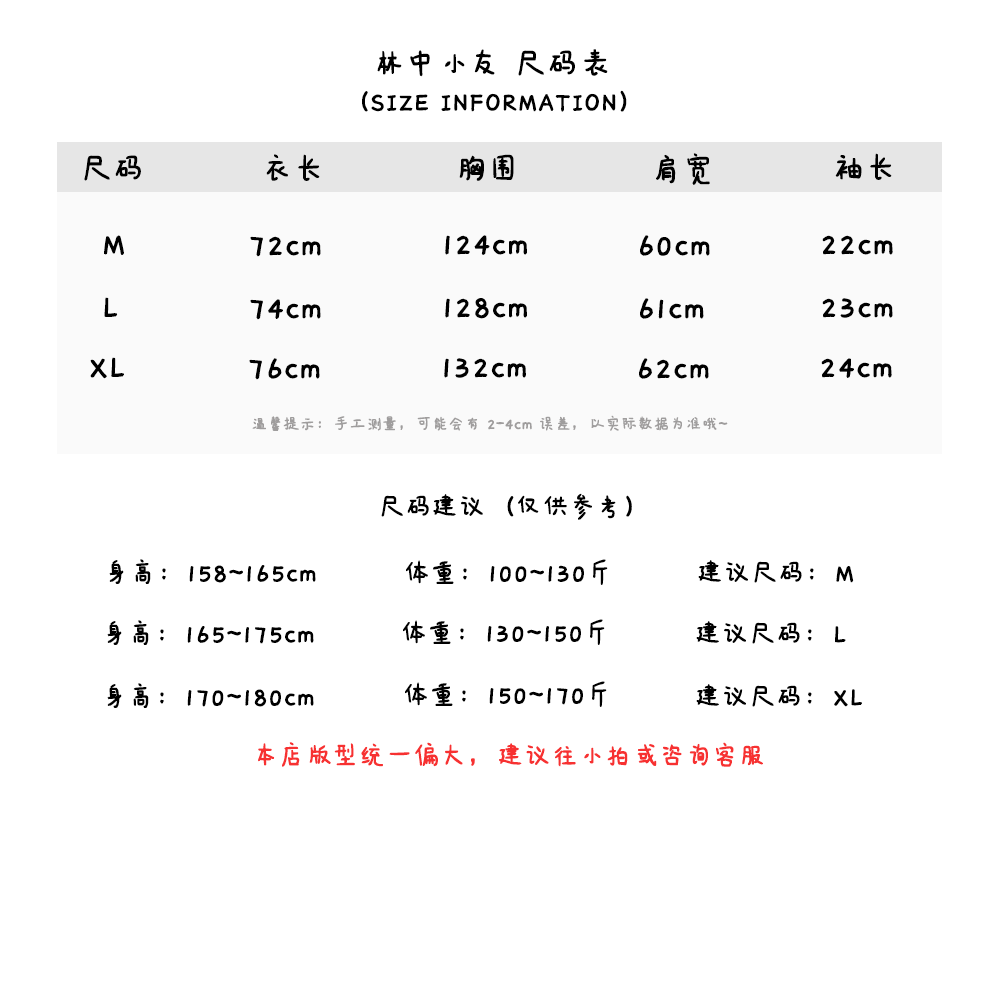
<style>
.page{position:relative;width:1000px;height:1000px;background:#ffffff}
.page>*{position:absolute;margin:0}
.t1{font:36px "IdeaFonts-QianXiaTi";color:#000000;font-weight:bold}
.t2{font:30px "IdeaFonts-QianXiaTi";color:#000000;font-weight:bold}
.t3{font:18px "IdeaFonts-QianXiaTi";color:#9f9d9d;font-weight:bold}
.t4{font:30px "IdeaFonts-QianXiaTi";color:#f73131;font-weight:bold}
</style>
<div class="page">
<p class="t1" style="left:377px;top:49px;width:231px;height:28px">林中小友 尺码表</p>
<p class="t2" style="left:362px;top:90px;width:265px;height:22px">（SIZE INFORMATION）</p>
<p class="t1" style="left:84px;top:155px;width:57px;height:26px">尺码</p>
<p class="t1" style="left:266px;top:154px;width:54px;height:27px">衣长</p>
<p class="t1" style="left:459px;top:154px;width:55px;height:27px">胸围</p>
<p class="t1" style="left:656px;top:153px;width:54px;height:32px">肩宽</p>
<p class="t1" style="left:835px;top:153px;width:57px;height:27px">袖长</p>
<p class="t1" style="left:104px;top:235px;width:20px;height:20px">M</p>
<p class="t1" style="left:250px;top:236px;width:71px;height:21px">72cm</p>
<p class="t1" style="left:445px;top:235px;width:82px;height:20px">124cm</p>
<p class="t1" style="left:640px;top:235px;width:70px;height:21px">60cm</p>
<p class="t1" style="left:822px;top:235px;width:71px;height:20px">22cm</p>
<p class="t1" style="left:104px;top:297px;width:14px;height:20px">L</p>
<p class="t1" style="left:250px;top:299px;width:71px;height:21px">74cm</p>
<p class="t1" style="left:445px;top:298px;width:82px;height:21px">128cm</p>
<p class="t1" style="left:640px;top:298px;width:64px;height:21px">61cm</p>
<p class="t1" style="left:822px;top:298px;width:71px;height:20px">23cm</p>
<p class="t1" style="left:90px;top:357px;width:34px;height:22px">XL</p>
<p class="t1" style="left:249px;top:358px;width:71px;height:22px">76cm</p>
<p class="t1" style="left:444px;top:358px;width:82px;height:20px">132cm</p>
<p class="t1" style="left:639px;top:358px;width:70px;height:21px">62cm</p>
<p class="t1" style="left:821px;top:358px;width:71px;height:20px">24cm</p>
<p class="t3" style="left:252px;top:415px;width:476px;height:16px">温馨提示：手工测量，可能会有 2-4cm 误差，以实际数据为准哦~</p>
<p class="t2" style="left:381px;top:493px;width:251px;height:27px">尺码建议（仅供参考）</p>
<p class="t2" style="left:109px;top:559px;width:207px;height:25px">身高：158~165cm</p>
<p class="t2" style="left:406px;top:559px;width:202px;height:26px">体重：100~130斤</p>
<p class="t2" style="left:698px;top:560px;width:156px;height:23px">建议尺码：M</p>
<p class="t2" style="left:107px;top:620px;width:207px;height:25px">身高：165~175cm</p>
<p class="t2" style="left:403px;top:619px;width:202px;height:26px">体重：130~150斤</p>
<p class="t2" style="left:696px;top:621px;width:150px;height:23px">建议尺码：L</p>
<p class="t2" style="left:107px;top:683px;width:207px;height:25px">身高：170~180cm</p>
<p class="t2" style="left:405px;top:681px;width:202px;height:26px">体重：150~170斤</p>
<p class="t2" style="left:696px;top:684px;width:166px;height:23px">建议尺码：XL</p>
<p class="t4" style="left:258px;top:742px;width:505px;height:25px">本店版型统一偏大，建议往小拍或咨询客服</p>
</div>
